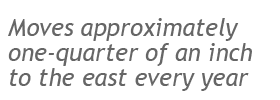
<style>
.page{position:relative;width:280px;height:100px;background:#ffffff}
.page>*{position:absolute;margin:0}
.t1{font:24px/25px "TrebuchetMS-Italic";color:#666666}
</style>
<div class="page">
<p class="t1" style="left:8px;top:18px;width:244px;height:73px">Moves approximately <br>one-quarter of an inch <br>to the east every year</p>
</div>
